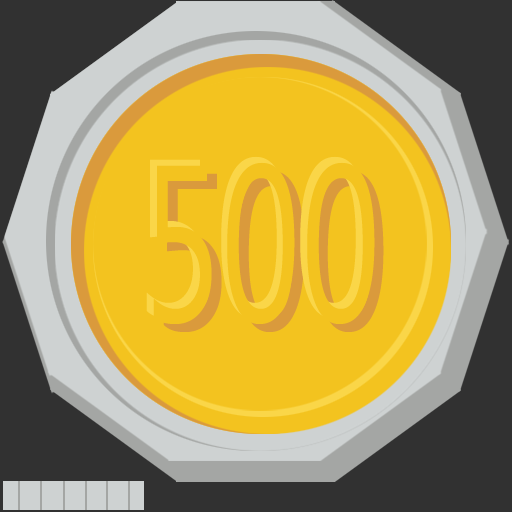
<style>
.page{position:relative;width:512px;height:512px;background:#f3c31f}
.page>*{position:absolute;margin:0}
.t1{font:204.7px "MicrosoftJhengHeiRegular";scale:0.67 1}
.t2{font:204.7px "MicrosoftJhengHeiRegular";color:#f3c31f;scale:0.67 1}
.t3{font:204.7px "MicrosoftJhengHeiRegular";color:#da9a3c;scale:0.67 1}
</style>
<div class="page">
<p class="t1" style="left:146px;top:156px;width:222px;height:162px">500</p>
<p class="t2" style="left:153px;top:162px;width:222px;height:162px">500</p>
<p class="t3" style="left:163px;top:170px;width:221px;height:162px">500</p>
</div>
